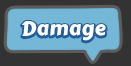
<style>
.page{position:relative;width:131px;height:66px;background:#74b7d7}
.page>*{position:absolute;margin:0}
.t1{font:20px "CarterOne";letter-spacing:0.025em;color:#ffffff}
</style>
<div class="page">
<p class="t1" style="left:22px;top:21px;width:84px;height:20px">Damage</p>
</div>
